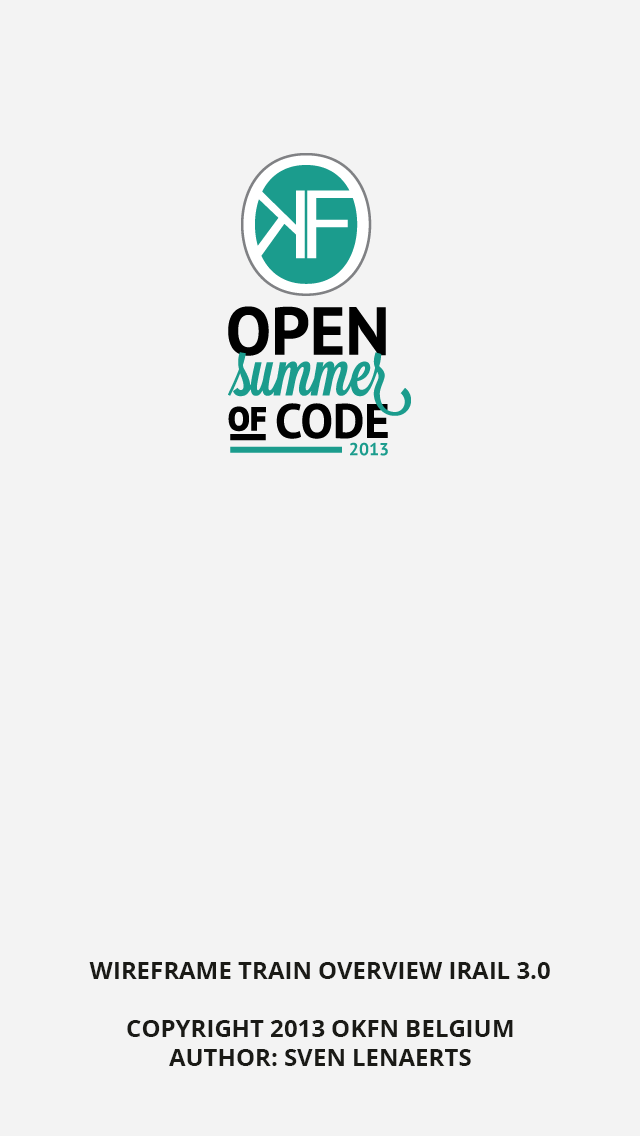
<style>
.page{position:relative;width:640px;height:1136px;background:#f3f3f3}
.page>*{position:absolute;margin:0}
.t1{font:24px "OpenSans-Bold";color:#1a1a16;text-transform:uppercase}
</style>
<div class="page">
<p class="t1" style="left:89px;top:962px;width:461px;height:104px;text-align:center">wireframe train overview irail 3.0<br><br>Copyright 2013 okfn belgium<br>author: sven lenaerts</p>
</div>
